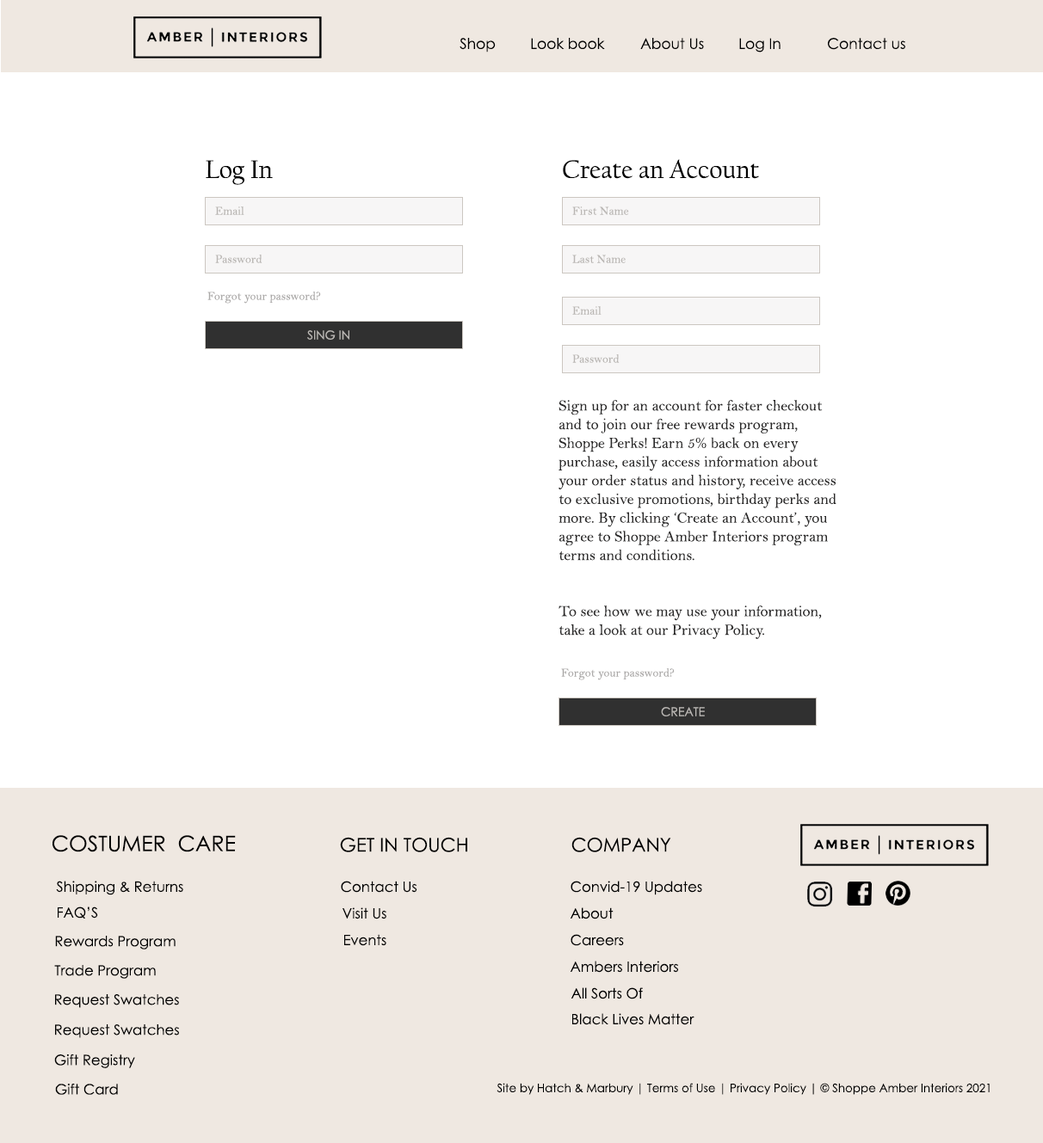
<style>
.page{position:relative;width:1043px;height:1143px;background:#ffffff}
.page>*{position:absolute;margin:0}
.t1{font:14.7px "CenturyGothic";color:#000000}
.t2{font:26.1px "CalifornianFB-Reg";color:#000000}
.t3{font:12px "BellMT";color:#bab7b4}
.t4{font:12px "BellMT";color:#acaaa9}
.t5{font:12px "CenturyGothic";color:#bab7b4}
.t6{font:15.6px "BellMT";color:#2a2929}
.t7{font:21.5px "CenturyGothic";color:#000000}
.t8{font:19px "CenturyGothic";color:#000000}
.t9{font:14.2px "CenturyGothic";color:#000000}
.t10{font:11.6px "CenturyGothic";color:#000000}
</style>
<div class="page">
<p class="t1" style="left:459px;top:38px;width:37px;height:14px">Shop</p>
<p class="t1" style="left:531px;top:38px;width:74px;height:11px">Look book</p>
<p class="t1" style="left:640px;top:38px;width:64px;height:12px">About Us</p>
<p class="t1" style="left:739px;top:38px;width:41px;height:14px">Log In</p>
<p class="t1" style="left:828px;top:38px;width:77px;height:12px">Contact us</p>
<p class="t2" style="left:206px;top:160px;width:67px;height:25px">Log In</p>
<p class="t2" style="left:563px;top:159px;width:196px;height:20px">Create an Account</p>
<p class="t3" style="left:215px;top:206px;width:29px;height:9px">Email</p>
<p class="t3" style="left:572px;top:206px;width:57px;height:9px">First Name</p>
<p class="t3" style="left:215px;top:255px;width:47px;height:8px">Password</p>
<p class="t3" style="left:572px;top:255px;width:54px;height:8px">Last Name</p>
<p class="t4" style="left:207px;top:292px;width:114px;height:12px">Forgot your password?</p>
<p class="t3" style="left:572px;top:306px;width:29px;height:9px">Email</p>
<p class="t5" style="left:307px;top:330px;width:42px;height:10px">SING IN</p>
<p class="t3" style="left:572px;top:354px;width:47px;height:9px">Password</p>
<p class="t6" style="left:558px;top:400px;width:278px;height:239px">Sign up for an account for faster checkout <br>and to join our free rewards program, <br>Shoppe Perks! Earn 5% back on every <br>purchase, easily access information about <br>your order status and history, receive access <br>to exclusive promotions, birthday perks and <br>more. By clicking ‘Create an Account’, you <br>agree to Shoppe Amber Interiors program <br>terms and conditions.<br><br><br>To see how we may use your information, <br>take a look at our Privacy Policy.</p>
<p class="t4" style="left:561px;top:669px;width:114px;height:12px">Forgot your password?</p>
<p class="t5" style="left:661px;top:707px;width:44px;height:10px">CREATE</p>
<p class="t7" style="left:52px;top:835px;width:184px;height:18px">COSTUMER  CARE</p>
<p class="t8" style="left:340px;top:837px;width:127px;height:16px">GET IN TOUCH</p>
<p class="t8" style="left:571px;top:837px;width:100px;height:16px">COMPANY</p>
<p class="t9" style="left:56px;top:881px;width:127px;height:15px">Shipping &amp; Returns</p>
<p class="t9" style="left:341px;top:881px;width:76px;height:12px">Contact Us</p>
<p class="t9" style="left:570px;top:881px;width:132px;height:15px">Convid-19 Updates</p>
<p class="t9" style="left:58px;top:907px;width:40px;height:12px">FAQ’S</p>
<p class="t9" style="left:342px;top:908px;width:44px;height:12px">Visit Us</p>
<p class="t9" style="left:570px;top:908px;width:43px;height:12px">About</p>
<p class="t9" style="left:55px;top:936px;width:121px;height:14px">Rewards Program</p>
<p class="t9" style="left:344px;top:934px;width:42px;height:12px">Events</p>
<p class="t9" style="left:570px;top:934px;width:54px;height:12px">Careers</p>
<p class="t9" style="left:54px;top:965px;width:102px;height:14px">Trade Program</p>
<p class="t9" style="left:570px;top:961px;width:108px;height:12px">Ambers Interiors</p>
<p class="t9" style="left:570px;top:988px;width:73px;height:12px">All Sorts Of</p>
<p class="t9" style="left:55px;top:995px;width:124px;height:13px">Request Swatches</p>
<p class="t9" style="left:572px;top:1014px;width:122px;height:12px">Black Lives Matter</p>
<p class="t9" style="left:55px;top:1025px;width:124px;height:14px">Request Swatches</p>
<p class="t9" style="left:54px;top:1054px;width:81px;height:15px">Gift Registry</p>
<p class="t9" style="left:55px;top:1084px;width:63px;height:11px">Gift Card</p>
<p class="t10" style="left:496px;top:1083px;width:493px;height:12px">Site by Hatch &amp; Marbury | Terms of Use | Privacy Policy | © Shoppe Amber Interiors 2021</p>
</div>
